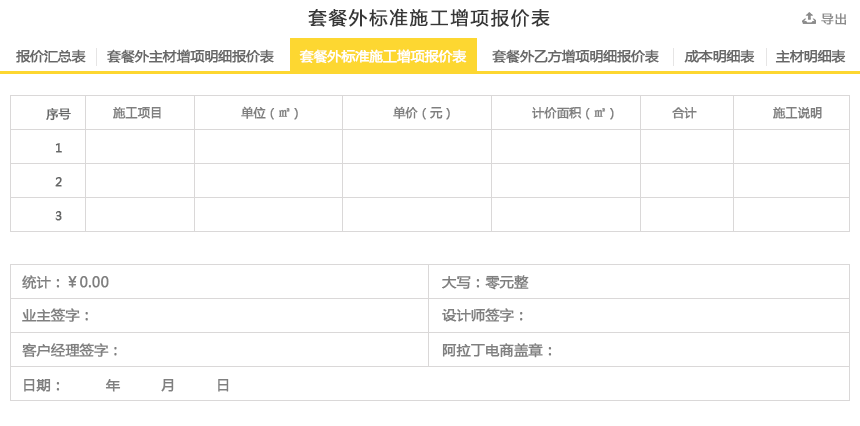
<style>
.page{position:relative;width:860px;height:426px;background:#ffffff}
.page>*{position:absolute;margin:0}
.t1{font:18px "MicrosoftYaHei";letter-spacing:0.1em;color:#373737;font-weight:bold}
.t2{font:12px "MicrosoftYaHei";letter-spacing:0.1em;color:#8b8b8b;font-weight:bold}
.t3{font:13.5px "MicrosoftYaHei";color:#676767;font-weight:bold}
.t4{font:13.5px "MicrosoftYaHei";color:#ffffff;font-weight:bold}
.t5{font:12px "MicrosoftYaHei";color:#666767;font-weight:bold}
.t6{font:12px "MicrosoftYaHei";color:#7f7f7f;font-weight:bold}
.t7{font:12px "SimSun";color:#7f7f7f;font-weight:bold}
.t8{font:14px "MicrosoftYaHei";color:#7f7f7f;font-weight:bold}
</style>
<div class="page">
<p class="t1" style="left:308px;top:8px;width:242px;height:19px">套餐外标准施工增项报价表</p>
<p class="t2" style="left:821px;top:13px;width:25px;height:12px">导出</p>
<p class="t3" style="left:16px;top:49px;width:830px;height:15px">报价汇总表     套餐外主材增项明细报价表      <span class="t4">套餐外标准施工增项报价表</span>      套餐外乙方增项明细报价表      成本明细表     主材明细表</p>
<p class="t5" style="left:46px;top:108px;width:25px;height:13px">序号</p>
<p class="t6" style="left:113px;top:107px;width:48px;height:12px">施工项目</p>
<p class="t6" style="left:241px;top:106px;width:57px;height:14px">单位（<span class="t7">㎡</span>）</p>
<p class="t6" style="left:393px;top:106px;width:57px;height:14px">单价（元）</p>
<p class="t6" style="left:532px;top:107px;width:82px;height:13px">计价面积（<span class="t7">㎡</span>）</p>
<p class="t6" style="left:672px;top:107px;width:25px;height:12px">合计</p>
<p class="t6" style="left:773px;top:107px;width:49px;height:12px">施工说明</p>
<p class="t5" style="left:55px;top:143px;width:7px;height:10px">1</p>
<p class="t5" style="left:55px;top:177px;width:7px;height:10px">2</p>
<p class="t5" style="left:55px;top:211px;width:7px;height:10px">3</p>
<p class="t8" style="left:22px;top:275px;width:87px;height:15px">统计：￥0.00</p>
<p class="t8" style="left:442px;top:275px;width:87px;height:15px">大写：零元整</p>
<p class="t8" style="left:22px;top:308px;width:66px;height:14px">业主签字：</p>
<p class="t8" style="left:442px;top:308px;width:81px;height:14px">设计师签字：</p>
<p class="t8" style="left:22px;top:343px;width:95px;height:15px">客户经理签字：</p>
<p class="t8" style="left:442px;top:343px;width:110px;height:15px">阿拉丁电商盖章：</p>
<p class="t8" style="left:24px;top:379px;width:205px;height:13px">日期：         年         月         日</p>
</div>
